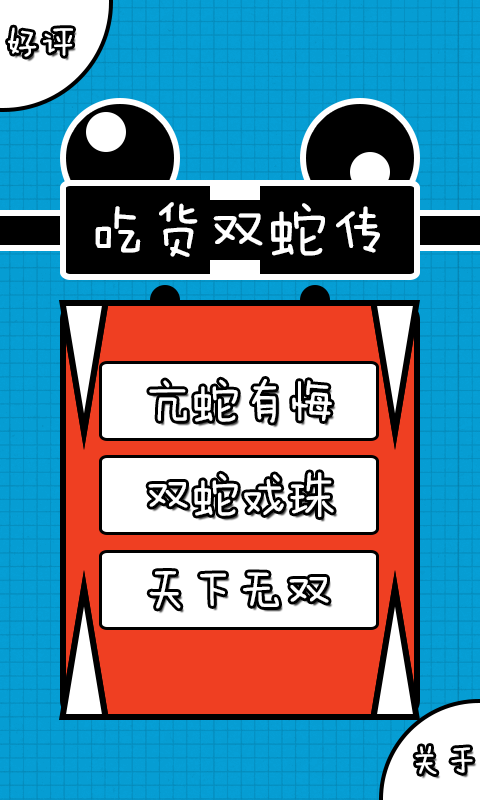
<style>
.page{position:relative;width:480px;height:800px;background:#069dd3}
.page>*{position:absolute;margin:0}
.t1{font:36px "FZMWJW--GB1-0";color:#ffffff}
.t2{font:60px "FZMWJW--GB1-0";color:#ffffff}
.t3{font:48px "FZMWJW--GB1-0";color:#ffffff}
</style>
<div class="page">
<p class="t1" style="left:8px;top:27px;width:65px;height:30px">好评</p>
<p class="t2" style="left:95px;top:202px;width:285px;height:55px">吃货双蛇传</p>
<p class="t3" style="left:149px;top:379px;width:183px;height:44px">亢蛇有悔</p>
<p class="t3" style="left:148px;top:472px;width:186px;height:46px">双蛇戏珠</p>
<p class="t1" style="left:415px;top:746px;width:58px;height:28px">关于</p>
</div>
